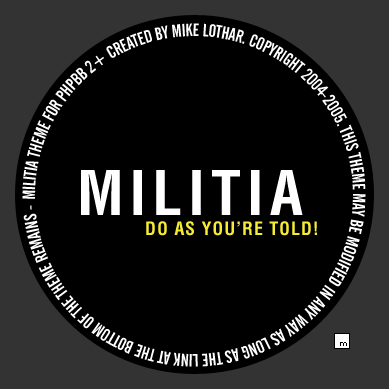
<style>
.page{position:relative;width:389px;height:389px;background:#000000}
.page>*{position:absolute;margin:0}
.t1{font:17.8px "AlternateGothicNo2BT-Regular";letter-spacing:-0.016em;color:#ffffff}
.t2{font:60px "Helvetica-Condensed-Bold";letter-spacing:0.1em;color:#ffffff}
.t3{font:18px "Helvetica-Condensed-Bold";letter-spacing:0.05em;color:#f6ec36}
</style>
<div class="page">
<p class="t1" style="left:22px;top:23px;width:344px;height:344px">MILITIA THEME FOR PHPBB 2+ CREATED BY MIKE LOTHAR. COPYRIGHT 2004-2005. THIS THEME MAY BE MODIFIED IN ANY WAY AS LONG AS THE LINK AT THE BOTTOM OF THE THEME REMAINS -</p>
<p class="t2" style="left:81px;top:170px;width:222px;height:45px">MILITIA</p>
<p class="t3" style="left:146px;top:221px;width:171px;height:15px">DO AS YOU’RE TOLD!</p>
</div>
